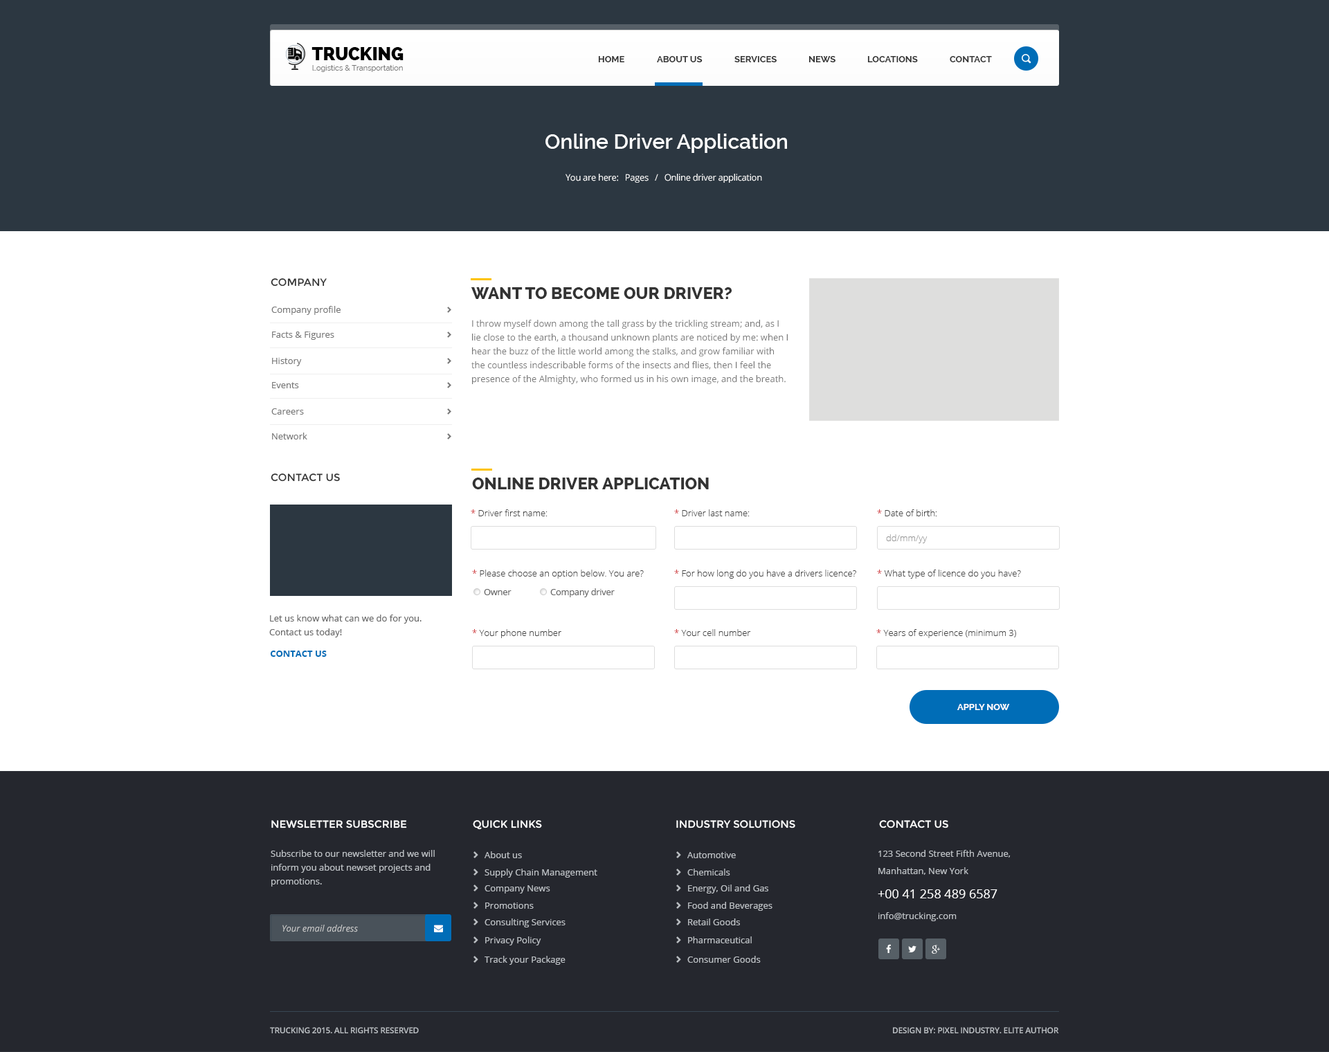
<style>
.page{position:relative;width:1329px;height:1052px;background:#ffffff}
.page>*{position:absolute;margin:0}
.t1{font:17.9px "Raleway-Heavy";color:#010101;text-transform:uppercase}
.t2{font:7.7px "Raleway";color:#777777}
.t3{font:9px "Raleway-Bold";color:#333333;text-transform:uppercase}
.t4{font:20.8px "Raleway-SemiBold";color:#ffffff}
.t5{font:9px "OpenSans";letter-spacing:-0.025em;color:#ffffff}
.t6{font:10.4px "Montserrat-Regular";color:#333333;text-transform:uppercase}
.t7{font:16.6px "Raleway-ExtraBold";color:#333333;text-transform:uppercase}
.t8{font:9px "OpenSans";color:#777777}
.t9{font:9px/13.8px "OpenSans";color:#777777}
.t10{font:9px "OpenSans-Light";color:#444444}
.t11{font:9px "OpenSans-Light";color:#ce292d}
.t12{font:9px "OpenSans-Light";color:#999999}
.t13{font:9px "OpenSans";letter-spacing:-0.025em;color:#666666}
.t14{font:9px/13.8px "OpenSans";color:#666666}
.t15{font:9px "OpenSans-Bold";color:#006db7;text-transform:uppercase}
.t16{font:9px "Raleway-Bold";color:#ffffff}
.t17{font:10.4px "Montserrat-Regular";color:#ffffff;text-transform:uppercase}
.t18{font:9px/13.8px "OpenSans";color:#bcc0c4}
.t19{font:9px "OpenSans";color:#bcc0c4}
.t20{font:12.5px "OpenSans";color:#ffffff}
.t21{font:9px "OpenSans-Italic";color:#cccccc}
.t22{font:8.3px "OpenSans-Semibold";letter-spacing:-0.025em;color:#bcc0c4;text-transform:uppercase}
</style>
<div class="page">
<p class="t1" style="left:312px;top:47px;width:92px;height:13px">TRUCKING</p>
<p class="t2" style="left:312px;top:65px;width:91px;height:7px">Logistics &amp; Transportation</p>
<p class="t3" style="left:598px;top:56px;width:26px;height:6px">HOME</p>
<p class="t3" style="left:657px;top:56px;width:46px;height:6px">ABOUT US</p>
<p class="t3" style="left:735px;top:56px;width:42px;height:6px">SERVICES</p>
<p class="t3" style="left:809px;top:56px;width:27px;height:6px">NEWS</p>
<p class="t3" style="left:867px;top:56px;width:51px;height:6px">LOCATIONS</p>
<p class="t3" style="left:950px;top:56px;width:42px;height:6px">CONTACT</p>
<p class="t4" style="left:546px;top:134px;width:241px;height:19px">Online Driver Application</p>
<p class="t5" style="left:566px;top:174px;width:196px;height:9px">You are here:   Pages   /   Online driver application</p>
<p class="t6" style="left:271px;top:278px;width:56px;height:9px">COMPANY</p>
<p class="t7" style="left:471px;top:287px;width:261px;height:12px">want to become our driver?</p>
<p class="t8" style="left:271px;top:306px;width:70px;height:9px">Company profile</p>
<p class="t9" style="left:471px;top:320px;width:317px;height:64px">I throw myself down among the tall grass by the trickling stream; and, as I lie close to the earth, a thousand unknown plants are noticed by me: when I hear the buzz of the little world among the stalks, and grow familiar with the countless indescribable forms of the insects and flies, then I feel the presence of the Almighty, who formed us in his own image, and the breath.</p>
<p class="t8" style="left:272px;top:332px;width:62px;height:8px">Facts &amp; Figures</p>
<p class="t8" style="left:272px;top:358px;width:30px;height:8px">History</p>
<p class="t8" style="left:272px;top:382px;width:27px;height:6px">Events</p>
<p class="t8" style="left:271px;top:408px;width:33px;height:7px">Careers</p>
<p class="t8" style="left:272px;top:433px;width:35px;height:7px">Network</p>
<p class="t6" style="left:271px;top:474px;width:69px;height:8px">CONTACT US</p>
<p class="t7" style="left:472px;top:478px;width:237px;height:11px">online driver application</p>
<p class="t10" style="left:471px;top:510px;width:77px;height:6px"><span class="t11">* </span>Driver first name:</p>
<p class="t10" style="left:674px;top:510px;width:76px;height:6px"><span class="t11">* </span>Driver last name:</p>
<p class="t10" style="left:877px;top:510px;width:60px;height:6px"><span class="t11">* </span>Date of birth:</p>
<p class="t12" style="left:886px;top:534px;width:42px;height:9px">dd/mm/yy</p>
<p class="t10" style="left:472px;top:570px;width:172px;height:9px"><span class="t11">* </span>Please choose an option below. You are?</p>
<p class="t10" style="left:674px;top:570px;width:182px;height:9px"><span class="t11">* </span>For how long do you have a drivers licence?</p>
<p class="t10" style="left:877px;top:570px;width:144px;height:9px"><span class="t11">* </span>What type of licence do you have?</p>
<p class="t13" style="left:484px;top:589px;width:28px;height:6px">Owner</p>
<p class="t13" style="left:550px;top:588px;width:65px;height:9px">Company driver</p>
<p class="t14" style="left:269px;top:615px;width:153px;height:23px">Let us know what can we do for you. <br>Contact us today!</p>
<p class="t10" style="left:472px;top:629px;width:89px;height:9px"><span class="t11">* </span>Your phone number</p>
<p class="t10" style="left:674px;top:629px;width:77px;height:7px"><span class="t11">* </span>Your cell number</p>
<p class="t10" style="left:876px;top:629px;width:140px;height:9px"><span class="t11">* </span>Years of experience (minimum 3)</p>
<p class="t15" style="left:270px;top:651px;width:57px;height:6px">CONTACT US</p>
<p class="t16" style="left:957px;top:704px;width:53px;height:6px">APPLY NOW</p>
<p class="t17" style="left:271px;top:820px;width:136px;height:9px">newsletter subscribe</p>
<p class="t17" style="left:473px;top:820px;width:69px;height:10px">quick links</p>
<p class="t17" style="left:676px;top:820px;width:119px;height:9px">INDUSTRY SOLUTIONS</p>
<p class="t17" style="left:879px;top:820px;width:69px;height:9px">contact us</p>
<p class="t18" style="left:271px;top:850px;width:164px;height:37px">Subscribe to our newsletter and we will inform you about newset projects and promotions.</p>
<p class="t19" style="left:485px;top:852px;width:37px;height:6px">About us</p>
<p class="t19" style="left:687px;top:852px;width:49px;height:6px">Automotive</p>
<p class="t18" style="left:879px;top:850px;width:132px;height:25px">123 Second Street Fifth Avenue, <br>Manhattan, New York</p>
<p class="t19" style="left:485px;top:869px;width:112px;height:9px">Supply Chain Management</p>
<p class="t19" style="left:687px;top:869px;width:43px;height:7px">Chemicals</p>
<p class="t19" style="left:485px;top:885px;width:65px;height:9px">Company News</p>
<p class="t19" style="left:688px;top:885px;width:80px;height:9px">Energy, Oil and Gas</p>
<p class="t20" style="left:878px;top:890px;width:120px;height:9px">+00 41 258 489 6587</p>
<p class="t19" style="left:485px;top:903px;width:49px;height:6px">Promotions</p>
<p class="t19" style="left:688px;top:902px;width:85px;height:9px">Food and Beverages</p>
<p class="t19" style="left:879px;top:912px;width:78px;height:9px">info@trucking.com</p>
<p class="t21" style="left:282px;top:925px;width:76px;height:8px">Your email address</p>
<p class="t19" style="left:485px;top:919px;width:81px;height:9px">Consulting Services</p>
<p class="t19" style="left:688px;top:919px;width:52px;height:7px">Retail Goods</p>
<p class="t19" style="left:485px;top:937px;width:56px;height:9px">Privacy Policy</p>
<p class="t19" style="left:688px;top:937px;width:64px;height:7px">Pharmaceutical</p>
<p class="t19" style="left:485px;top:956px;width:81px;height:9px">Track your Package</p>
<p class="t19" style="left:687px;top:956px;width:74px;height:7px">Consumer Goods</p>
<p class="t22" style="left:270px;top:1027px;width:149px;height:7px">TRUCKING 2015. ALL RIGHTS RESERVED</p>
<p class="t22" style="left:893px;top:1027px;width:166px;height:7px">DESIGN BY: PIXEL INDUSTRY. ELITE AUTHOR</p>
</div>
